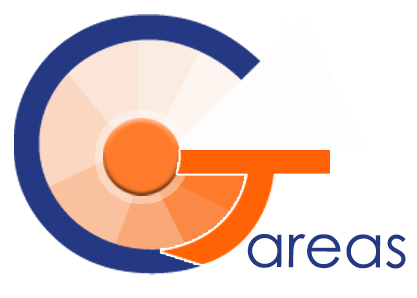
<style>
.page{position:relative;width:417px;height:298px;background:#ffffff}
.page>*{position:absolute;margin:0}
.t1{font:60.4px "CenturyGothic";color:#243884}
</style>
<div class="page">
<p class="t1" style="left:247px;top:234px;width:159px;height:35px">areas</p>
</div>
